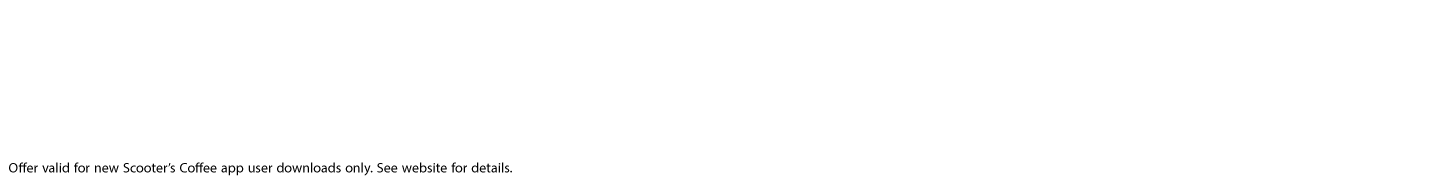
<style>
.page{position:relative;width:1456px;height:180px;background:#ffffff}
.page>*{position:absolute;margin:0}
.t1{font:14px "MyriadPro-Regular";color:#000000}
</style>
<div class="page">
<p class="t1" style="left:9px;top:162px;width:503px;height:14px">Offer valid for new Scooter’s Coffee app user downloads only. See website for details.</p>
</div>
